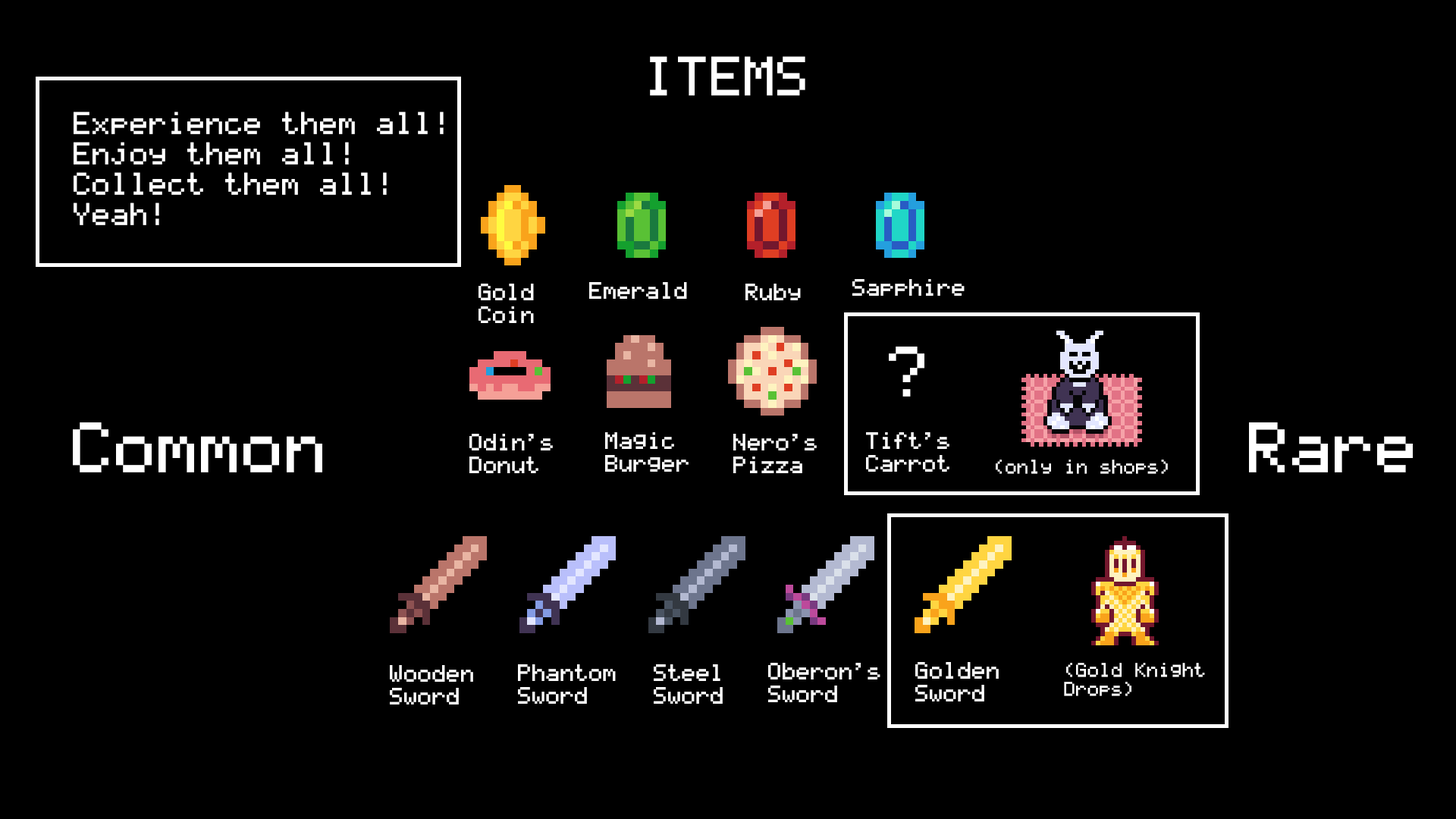
<style>
.page{position:relative;width:1456px;height:819px;background:#000000}
.page>*{position:absolute;margin:0}
.t1{font:44.2px "TI-83-Plus-Large";color:#ffffff}
.t2{font:25.3px "TI-83-Plus-Large";color:#ffffff}
.t3{font:19px "TI-83-Plus-Large";color:#ffffff}
.t4{font:56.9px "TI-83-Plus-Large";color:#ffffff}
.t5{font:15.8px "TI-83-Plus-Large";color:#ffffff}
</style>
<div class="page">
<p class="t1" style="left:650px;top:56px;width:155px;height:40px">ITEMS</p>
<p class="t2" style="left:74px;top:111px;width:370px;height:114px">Experience them all!<br>Enjoy them all!<br>Collect them all!<br>Yeah!</p>
<p class="t3" style="left:852px;top:279px;width:113px;height:17px">Sapphire</p>
<p class="t3" style="left:479px;top:284px;width:55px;height:39px">Gold<br>Coin</p>
<p class="t3" style="left:589px;top:282px;width:98px;height:17px">Emerald</p>
<p class="t3" style="left:745px;top:284px;width:56px;height:16px">Ruby</p>
<p class="t4" style="left:889px;top:347px;width:35px;height:50px">?</p>
<p class="t4" style="left:73px;top:422px;width:249px;height:50px">Common</p>
<p class="t4" style="left:1249px;top:422px;width:164px;height:50px">Rare</p>
<p class="t3" style="left:469px;top:434px;width:84px;height:39px">Odin’s<br>Donut</p>
<p class="t3" style="left:605px;top:432px;width:84px;height:40px">Magic<br>Burger</p>
<p class="t3" style="left:733px;top:434px;width:84px;height:39px">Nero’s<br>Pizza</p>
<p class="t3" style="left:866px;top:432px;width:83px;height:40px">Tift’s<br>Carrot</p>
<p class="t5" style="left:996px;top:460px;width:172px;height:14px">(only in shops)</p>
<p class="t3" style="left:390px;top:665px;width:83px;height:39px">Wooden<br>Sword</p>
<p class="t3" style="left:518px;top:664px;width:98px;height:40px">Phantom<br>Sword</p>
<p class="t3" style="left:654px;top:664px;width:69px;height:40px">Steel<br>Sword</p>
<p class="t3" style="left:768px;top:663px;width:112px;height:39px">Oberon’s<br>Sword</p>
<p class="t3" style="left:915px;top:662px;width:84px;height:39px">Golden<br>Sword</p>
<p class="t5" style="left:1064px;top:663px;width:141px;height:33px">(Gold Knight<br>Drops)</p>
</div>
